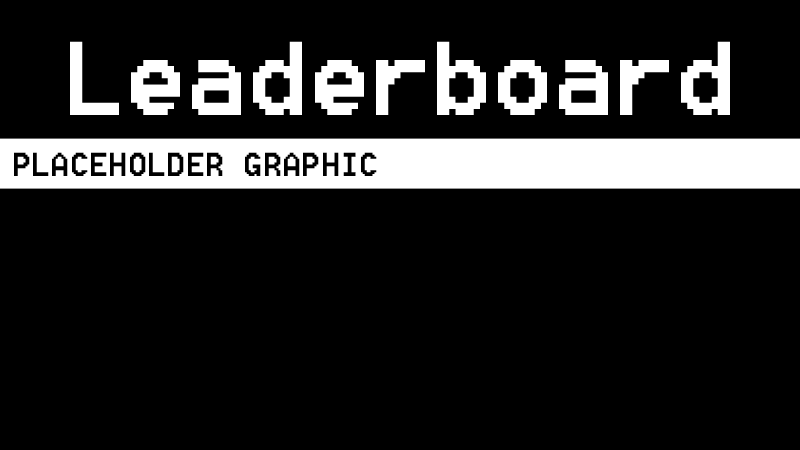
<style>
.page{position:relative;width:800px;height:450px;background:#000000}
.page>*{position:absolute;margin:0}
.t1{font:130.4px "8514oem";color:#ffffff}
.t2{font:41.2px "8514oem";color:#000000}
</style>
<div class="page">
<p class="t1" style="left:70px;top:41px;width:660px;height:74px">Leaderboard</p>
<p class="t2" style="left:14px;top:152px;width:363px;height:24px">PLACEHOLDER GRAPHIC</p>
</div>
